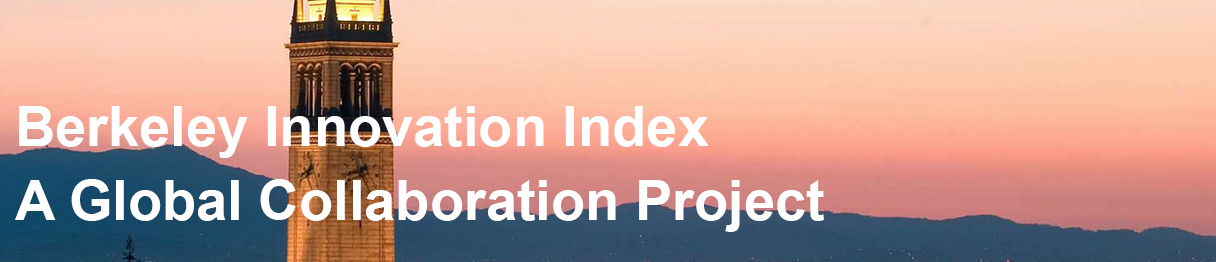
<style>
.page{position:relative;width:1216px;height:262px}
.page>*{position:absolute;margin:0}
.t1{font:56px/32px "Arial-BoldMT";color:#ffffff}
</style>
<div class="page">
<p class="t1" style="left:15px;top:106px;width:809px;height:126px">Berkeley Innovation Index<br><br><br><br>A Global Collaboration Project</p>
</div>
